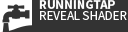
<style>
.page{position:relative;width:128px;height:32px;background:#333333}
.page>*{position:absolute;margin:0}
.t1{font:13px/11px "SourceSansPro-Regular";color:#ffffff}
.t2{font:13px/11px "SourceSansPro-Bold";color:#ffffff}
</style>
<div class="page">
<p class="t1" style="left:39px;top:0px;width:88px;height:20px"><span class="t2">RUNNINGTAP<br></span>REVEAL SHADER</p>
</div>
